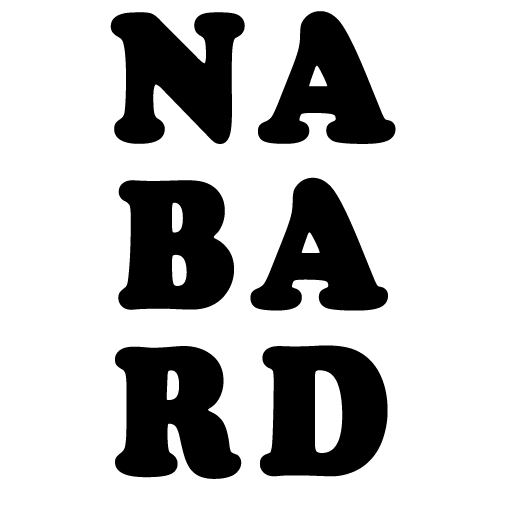
<style>
.page{position:relative;width:512px;height:512px;background:#ffffff}
.page>*{position:absolute;margin:0}
.t1{font:184.5px/166.7px "CooperBlack";letter-spacing:0.1em;color:#000000;font-weight:bold;scale:0.87 1}
</style>
<div class="page">
<p class="t1" style="left:110px;top:11px;width:286px;height:468px;text-align:center">NA<br>BA<br>RD</p>
</div>
